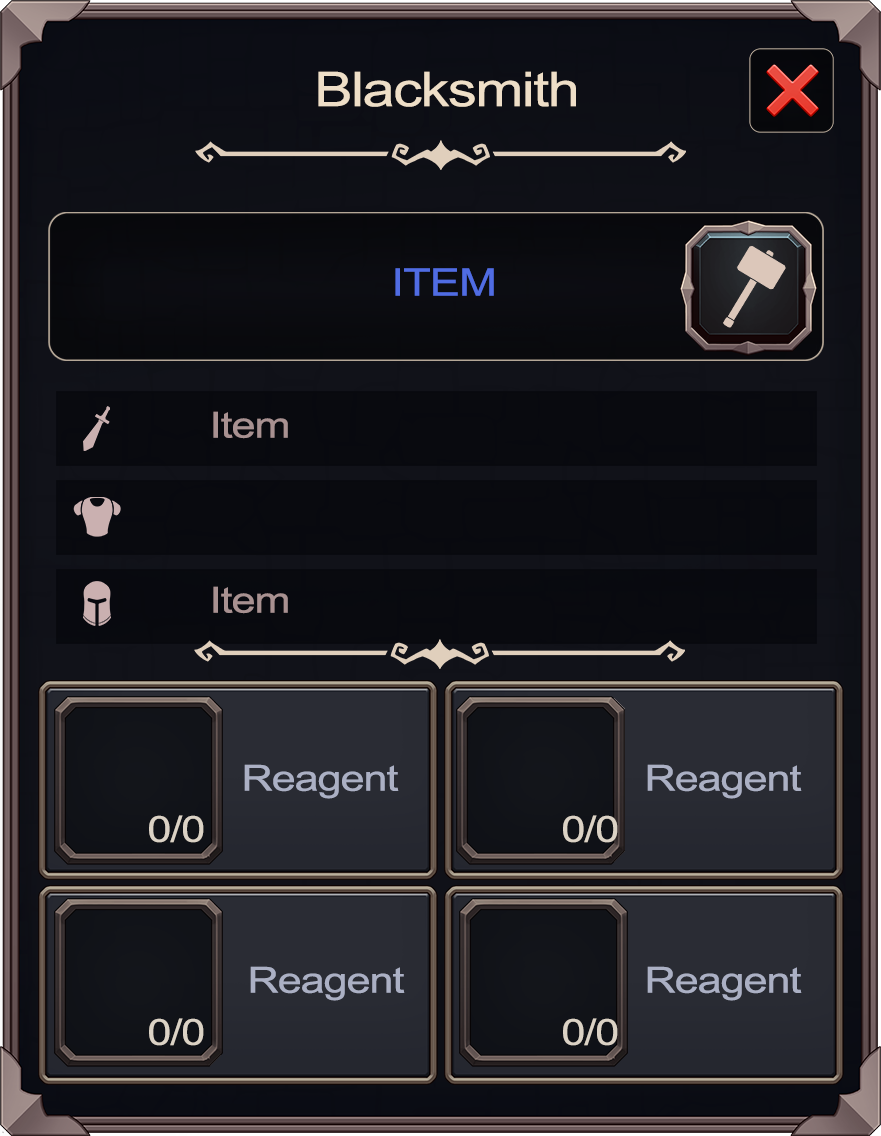
<style>
.page{position:relative;width:881px;height:1136px}
.page>*{position:absolute;margin:0}
.t1{font:48px "ArialMT";letter-spacing:-0.025em;color:#eedec7;scale:1.2 1}
.t2{font:38.1px "ArialMT";letter-spacing:-0.025em;color:#506ce3;scale:1.2 1}
.t3{font:36px "ArialMT";letter-spacing:-0.025em;color:#a89191;scale:1.2 1}
.t4{font:36px "ArialMT";letter-spacing:-0.025em;color:#abb0c4;scale:1.2 1}
.t5{font:36px "ArialMT";letter-spacing:-0.025em;color:#dbd2c5;scale:1.2 1}
</style>
<div class="page">
<p class="t1" style="left:318px;top:71px;width:258px;height:36px">Blacksmith</p>
<p class="t2" style="left:395px;top:268px;width:99px;height:28px">ITEM</p>
<p class="t3" style="left:213px;top:411px;width:75px;height:28px">Item</p>
<p class="t3" style="left:213px;top:586px;width:75px;height:28px">Item</p>
<p class="t4" style="left:244px;top:764px;width:155px;height:35px">Reagent</p>
<p class="t4" style="left:647px;top:764px;width:155px;height:35px">Reagent</p>
<p class="t5" style="left:149px;top:815px;width:55px;height:28px">0/0</p>
<p class="t5" style="left:563px;top:815px;width:55px;height:28px">0/0</p>
<p class="t4" style="left:250px;top:966px;width:155px;height:35px">Reagent</p>
<p class="t4" style="left:647px;top:966px;width:155px;height:35px">Reagent</p>
<p class="t5" style="left:149px;top:1018px;width:55px;height:28px">0/0</p>
<p class="t5" style="left:563px;top:1018px;width:55px;height:28px">0/0</p>
</div>
